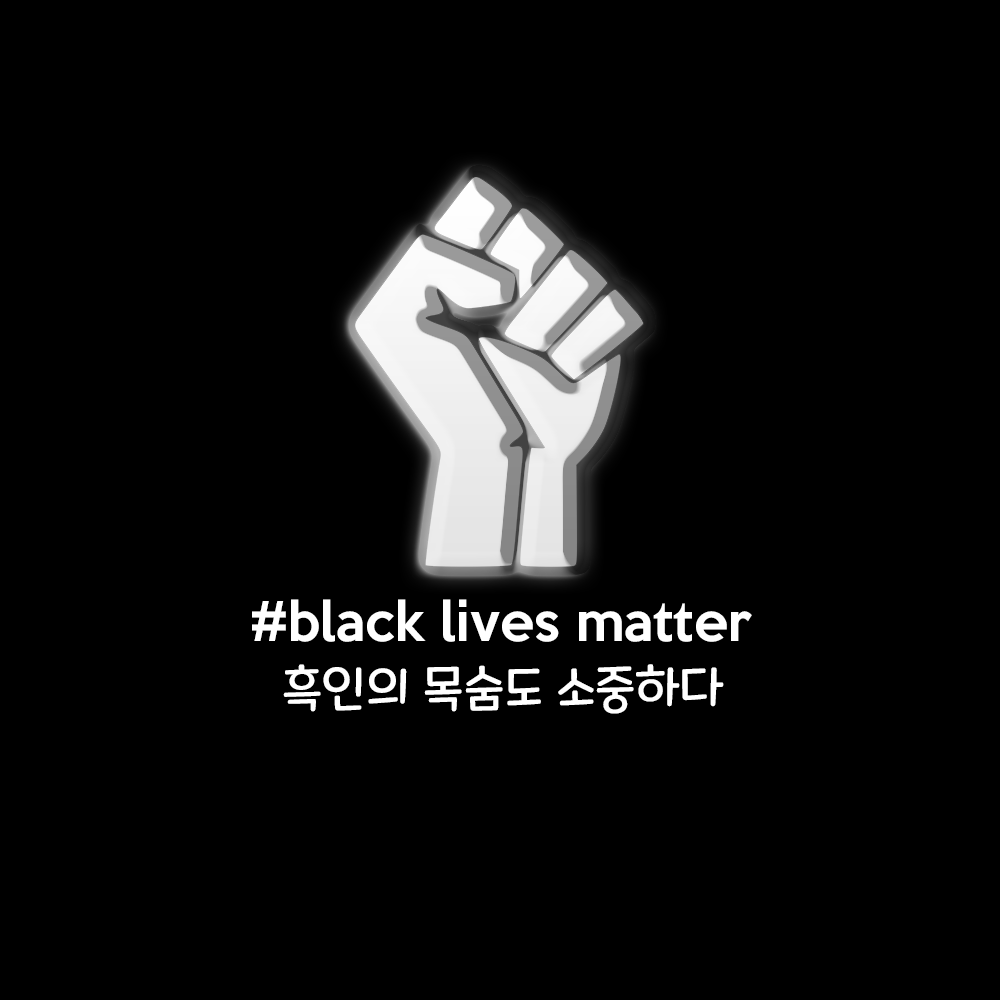
<style>
.page{position:relative;width:1000px;height:1000px;background:#000000}
.page>*{position:absolute;margin:0}
.t1{font:50px "KeepCalm-Medium";color:#ffffff}
.t2{font:12px "MaplestoryOTFLight";color:#ffffff}
</style>
<div class="page">
<p class="t1" style="left:252px;top:599px;width:500px;height:43px">#black lives matter</p>
<p class="t2" style="left:283px;top:664px;width:441px;height:50px;text-align:center">흑인의 목숨도 소중하다</p>
</div>
